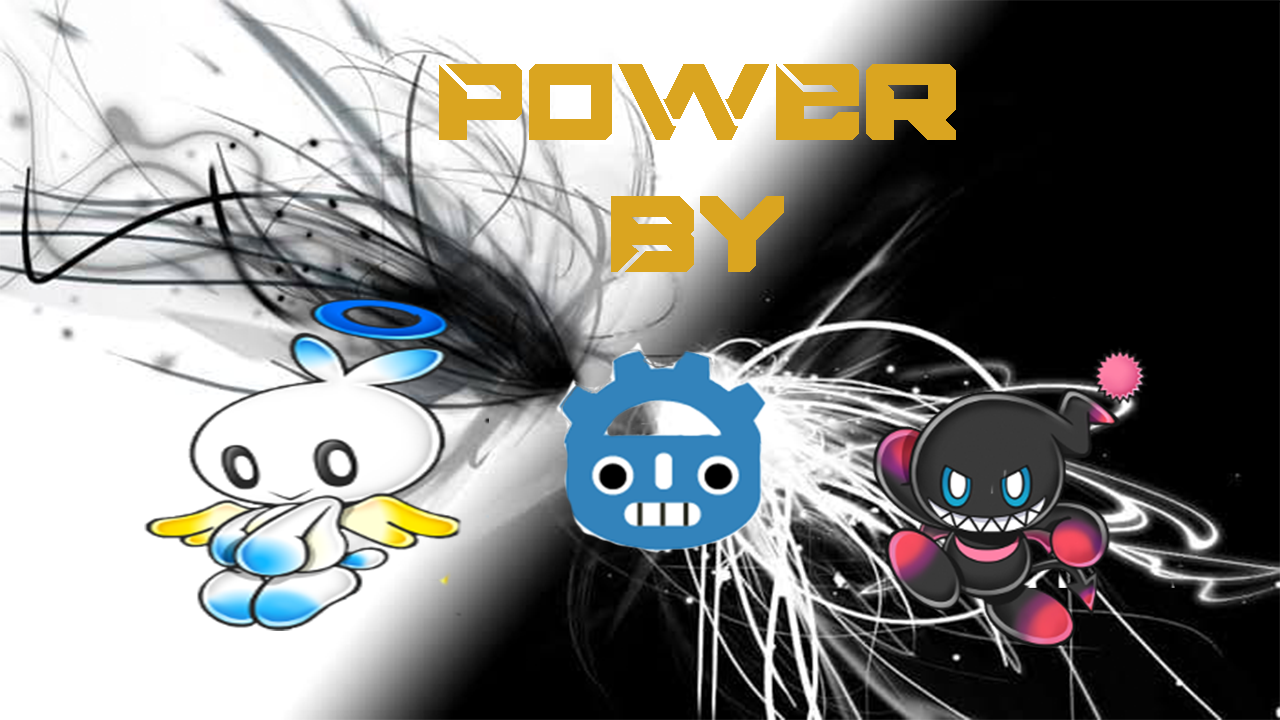
<style>
.page{position:relative;width:1280px;height:720px}
.page>*{position:absolute;margin:0}
.t1{font:110px "BIGMACCA";color:#daa520}
</style>
<div class="page">
<p class="t1" style="left:439px;top:64px;width:517px;height:208px;text-align:center">POWER<br>BY</p>
</div>
